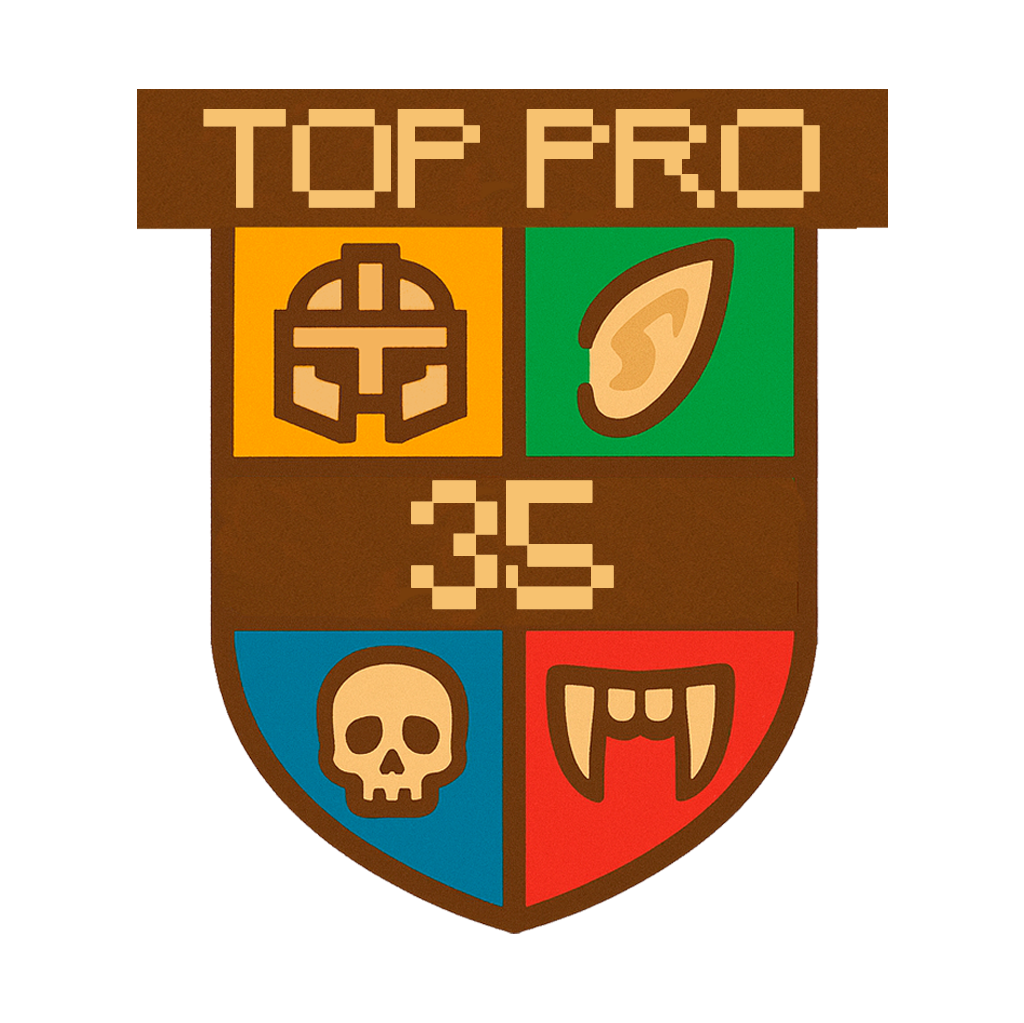
<style>
.page{position:relative;width:1024px;height:1023px;background:#ffffff}
.page>*{position:absolute;margin:0}
.t1{font:130px "Minecraft";letter-spacing:-0.03em;color:#f7c270;font-weight:bold}
.t2{font:170px "Minecraft";letter-spacing:-0.03em;color:#f7c270;font-weight:bold}
</style>
<div class="page">
<p class="t1" style="left:203px;top:109px;width:617px;height:99px">TOP PRO</p>
<p class="t2" style="left:411px;top:480px;width:203px;height:130px">35</p>
</div>
